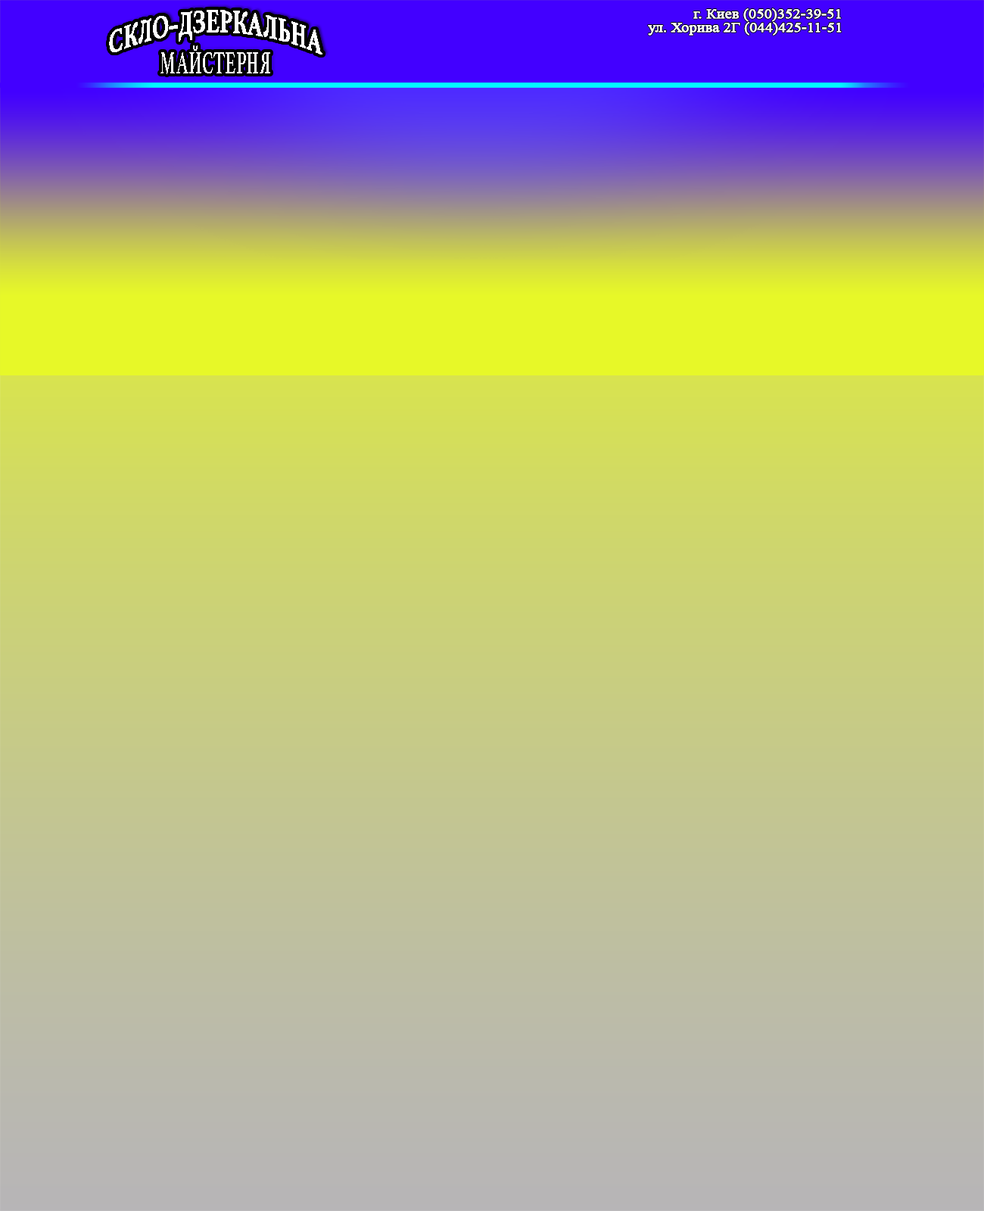
<style>
.page{position:relative;width:984px;height:1211px}
.page>*{position:absolute;margin:0}
.t1{font:32.3px "Athelas-Bold";color:#ffffff;scale:0.54 1}
.t2{font:38.8px "AlNile-Bold";color:#ffffff;scale:0.54 1}
.t3{font:32.3px "AlNile-Bold";color:#ffffff;scale:0.54 1}
.t4{font:14.5px "TimesNewRomanPSMT";color:#ffffff;font-weight:bold}
</style>
<div class="page">
<p class="t1" style="left:109px;top:10px;width:214px;height:45px"><span class="t2"><br><br></span>СКЛО<span class="t3">-</span>ДЗЕРКАЛЬНА</p>
<p class="t4" style="left:694px;top:8px;width:147px;height:14px">г. Киев (050)352-39-51</p>
<p class="t4" style="left:648px;top:22px;width:194px;height:14px">ул. Хорива 2Г (044)425-11-51</p>
<p class="t1" style="left:161px;top:45px;width:109px;height:29px"><span class="t2"><br><br></span>МАЙСТЕРНЯ</p>
</div>
